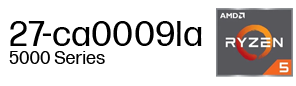
<style>
.page{position:relative;width:296px;height:86px;background:#ffffff}
.page>*{position:absolute;margin:0}
.t1{font:36px "FormaDJRMicro-Regular";color:#000000}
.t2{font:18px "FormaDJRMicro-Regular";color:#000000}
</style>
<div class="page">
<p class="t1" style="left:10px;top:21px;width:192px;height:25px">27-ca0009la</p>
<p class="t2" style="left:9px;top:51px;width:96px;height:13px">5000 Series</p>
</div>
